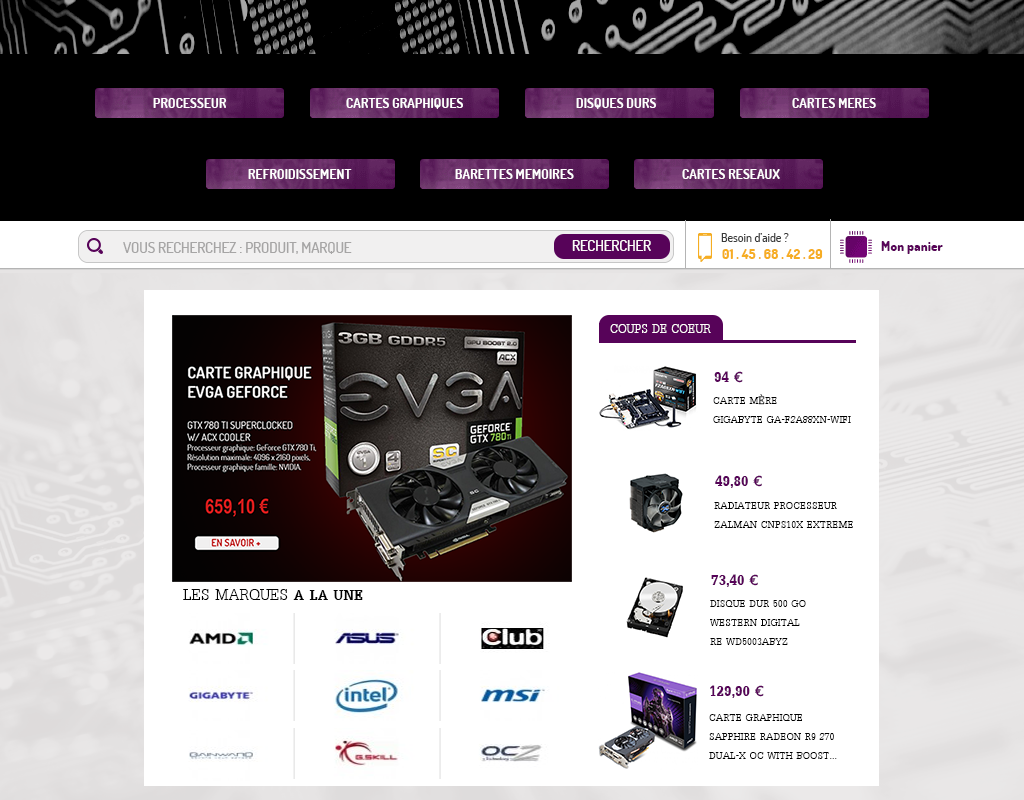
<style>
.page{position:relative;width:1024px;height:800px;background:#ffffff}
.page>*{position:absolute;margin:0}
.t1{font:13.3px "Dosis-Bold";color:#ffffff}
.t2{font:12px "Dosis-Medium";color:#3a3a3a}
.t3{font:14.7px "Dosis-Medium";color:#a6a5a5}
.t4{font:14.7px "Dosis-Medium";color:#fdfafa}
.t5{font:13.3px "Dosis-ExtraBold";color:#580459}
.t6{font:13.3px "Dosis-ExtraBold";color:#f6ad23}
.t7{font:18.7px "DilleniaUPC";color:#fffcfc}
.t8{font:24px "DilleniaUPCBold";color:#570359}
.t9{font:16px "DilleniaUPC";color:#000000}
.t10{font:24px "DilleniaUPC";color:#040404}
.t11{font:24px "DilleniaUPCBold";color:#040404}
</style>
<div class="page">
<p class="t1" style="left:153px;top:98px;width:74px;height:10px">PROCESSEUR</p>
<p class="t1" style="left:346px;top:98px;width:117px;height:11px">CARTES GRAPHIQUES</p>
<p class="t1" style="left:576px;top:98px;width:80px;height:11px">DISQUES DURS</p>
<p class="t1" style="left:792px;top:98px;width:84px;height:10px">CARTES MERES</p>
<p class="t1" style="left:248px;top:169px;width:104px;height:10px">REFROIDISSEMENT</p>
<p class="t1" style="left:455px;top:169px;width:119px;height:10px">BARETTES MEMOIRES</p>
<p class="t1" style="left:682px;top:169px;width:98px;height:10px">CARTES RESEAUX</p>
<p class="t2" style="left:721px;top:233px;width:68px;height:9px">Besoin d’aide ?</p>
<p class="t3" style="left:123px;top:242px;width:229px;height:12px">VOUS RECHERCHEZ : PRODUIT, MARQUE</p>
<p class="t4" style="left:572px;top:240px;width:79px;height:11px">RECHERCHER</p>
<p class="t5" style="left:881px;top:241px;width:62px;height:13px">Mon panier</p>
<p class="t6" style="left:722px;top:249px;width:101px;height:10px">01 . 45 . 68 . 42 . 29</p>
<p class="t7" style="left:610px;top:324px;width:101px;height:9px">COUPS DE COEUR</p>
<p class="t8" style="left:714px;top:371px;width:29px;height:12px">94 €</p>
<p class="t9" style="left:713px;top:394px;width:138px;height:29px">CARTE MÈRE<br>GIGABYTE GA-F2A88XN-WIFI</p>
<p class="t8" style="left:715px;top:475px;width:47px;height:13px">49,80 €</p>
<p class="t9" style="left:714px;top:502px;width:139px;height:26px">RADIATEUR PROCESSEUR<br>ZALMAN CNPS10X EXTREME</p>
<p class="t8" style="left:711px;top:574px;width:47px;height:13px">73,40 €</p>
<p class="t10" style="left:183px;top:589px;width:180px;height:11px">LES MARQUES <span class="t11">A LA UNE</span></p>
<p class="t9" style="left:710px;top:600px;width:96px;height:45px">DISQUE DUR 500 GO<br>WESTERN DIGITAL <br>RE WD5003ABYZ</p>
<p class="t8" style="left:710px;top:685px;width:54px;height:13px">129,90 €</p>
<p class="t9" style="left:709px;top:714px;width:128px;height:45px">CARTE GRAPHIQUE<br>SAPPHIRE RADEON R9 270 <br>DUAL-X OC WITH BOOST...</p>
</div>
